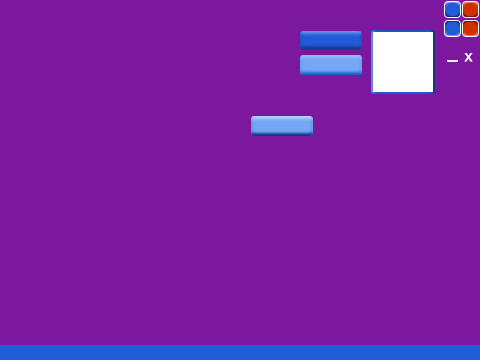
<style>
.page{position:relative;width:480px;height:360px;background:#7c189e}
.page>*{position:absolute;margin:0}
.t1{font:16px "ArialMT";color:#ffffff}
</style>
<div class="page">
<p class="t1" style="left:464px;top:53px;width:9px;height:9px">x</p>
</div>
